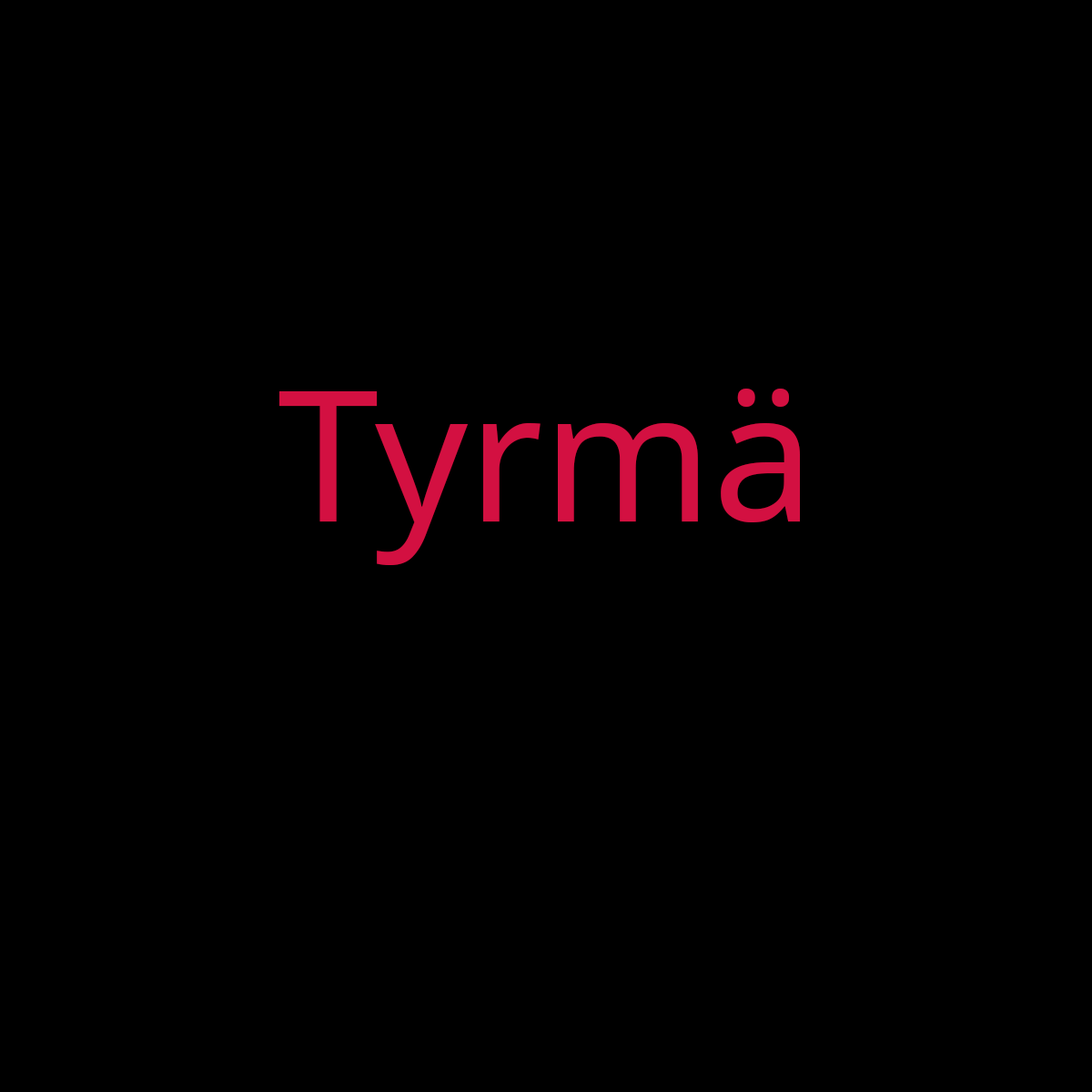
<style>
.page{position:relative;width:1092px;height:1092px;background:#000000}
.page>*{position:absolute;margin:0}
.t1{font:182px "NotoSans-Regular";color:#d31041}
</style>
<div class="page">
<p class="t1" style="left:279px;top:389px;width:521px;height:176px">Tyrmä</p>
</div>
